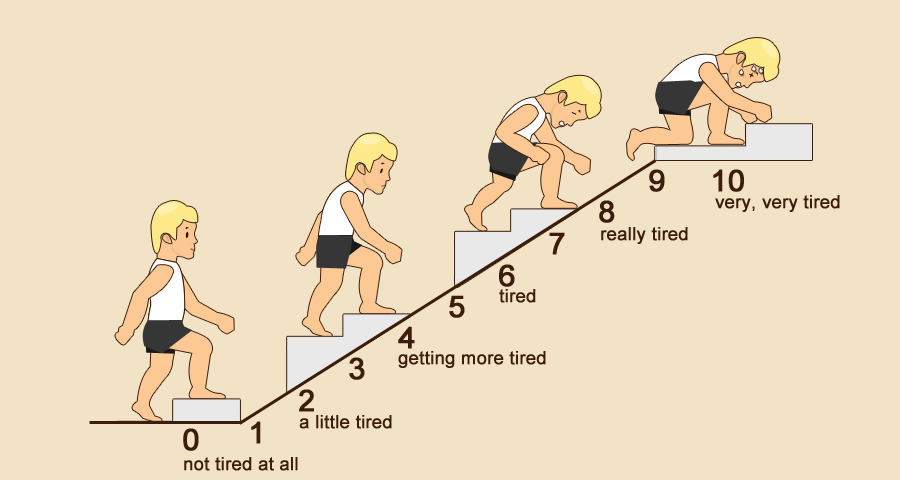
<style>
.page{position:relative;width:900px;height:480px;background:#f2e3c6}
.page>*{position:absolute;margin:0}
.t1{font:30px "ArialMT";color:#3c1d0b;font-weight:bold}
.t2{font:18px "ArialMT";color:#3c1d0b;font-weight:bold}
</style>
<div class="page">
<p class="t1" style="left:649px;top:169px;width:16px;height:23px">9</p>
<p class="t1" style="left:713px;top:169px;width:31px;height:23px">10</p>
<p class="t2" style="left:715px;top:195px;width:125px;height:17px">very, very tired</p>
<p class="t1" style="left:599px;top:200px;width:16px;height:23px">8</p>
<p class="t1" style="left:549px;top:232px;width:16px;height:23px">7</p>
<p class="t2" style="left:601px;top:227px;width:87px;height:17px">really tired</p>
<p class="t1" style="left:499px;top:264px;width:16px;height:23px">6</p>
<p class="t2" style="left:499px;top:289px;width:37px;height:14px">tired</p>
<p class="t1" style="left:449px;top:295px;width:16px;height:23px">5</p>
<p class="t1" style="left:398px;top:326px;width:17px;height:23px">4</p>
<p class="t2" style="left:398px;top:351px;width:148px;height:17px">getting more tired</p>
<p class="t1" style="left:349px;top:357px;width:16px;height:23px">3</p>
<p class="t1" style="left:299px;top:389px;width:15px;height:23px">2</p>
<p class="t1" style="left:251px;top:421px;width:10px;height:23px">1</p>
<p class="t2" style="left:299px;top:415px;width:93px;height:14px">a little tired</p>
<p class="t1" style="left:183px;top:428px;width:16px;height:23px">0</p>
<p class="t2" style="left:184px;top:457px;width:114px;height:14px">not tired at all</p>
</div>
